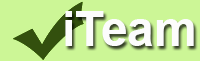
<style>
.page{position:relative;width:200px;height:61px;background:#ccf696}
.page>*{position:absolute;margin:0}
.t1{font:48px "Arial-BoldMT";color:#fcfcfc}
</style>
<div class="page">
<p class="t1" style="left:65px;top:11px;width:129px;height:35px">iTeam</p>
</div>
